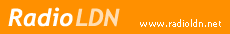
<style>
.page{position:relative;width:230px;height:34px;background:#ff9000}
.page>*{position:absolute;margin:0}
.t1{font:24px "Trebuchet-BoldItalic";color:#ffffff}
.t2{font:24px "Trebuchet-BoldItalic";letter-spacing:0.1em;color:#ffffff}
.t3{font:24px "Trebuchet-BoldItalic";color:#ffddb2}
.t4{font:9px "Tahoma";letter-spacing:0.05em;color:#ffffff}
</style>
<div class="page">
<p class="t1" style="left:8px;top:7px;width:112px;height:20px">Radi<span class="t2">o</span><span class="t3">LDN</span></p>
<p class="t4" style="left:140px;top:19px;width:81px;height:8px">www.radioldn.net</p>
</div>
